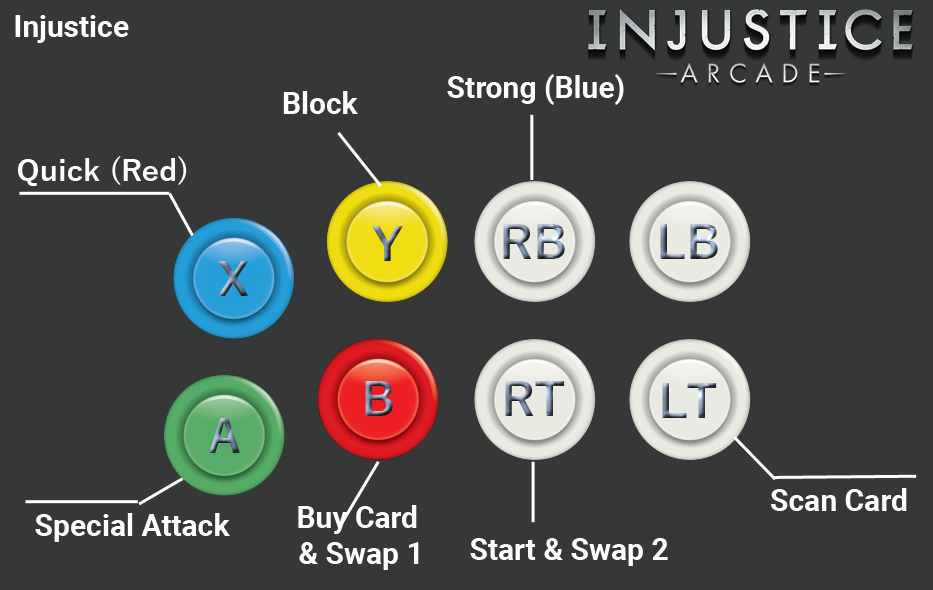
<style>
.page{position:relative;width:933px;height:590px;background:#363838}
.page>*{position:absolute;margin:0}
.t1{font:30px "Roboto-Bold";color:#ffffff}
.t2{font:30px "YuGothic-Bold";color:#ffffff}
.t3{font:30px/36px "Roboto-Bold";color:#ffffff}
</style>
<div class="page">
<p class="t1" style="left:15px;top:15px;width:114px;height:28px">Injustice</p>
<p class="t1" style="left:447px;top:74px;width:177px;height:31px">Strong (Blue)</p>
<p class="t1" style="left:283px;top:91px;width:75px;height:23px">Block</p>
<p class="t2" style="left:18px;top:156px;width:169px;height:30px">Quick (Red)</p>
<p class="t1" style="left:771px;top:488px;width:136px;height:23px">Scan Card</p>
<p class="t3" style="left:298px;top:505px;width:121px;height:65px;text-align:center">Buy Card <br>&amp; Swap 1</p>
<p class="t1" style="left:35px;top:513px;width:195px;height:29px">Special Attack</p>
<p class="t1" style="left:470px;top:538px;width:198px;height:28px">Start &amp; Swap 2</p>
</div>
